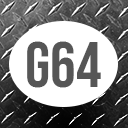
<style>
.page{position:relative;width:128px;height:128px;background:#ffffff}
.page>*{position:absolute;margin:0}
.t1{font:64px "BebasNeue-Regular";color:#565656}
</style>
<div class="page">
<p class="t1" style="left:27px;top:41px;width:74px;height:47px">G64</p>
</div>
